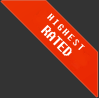
<style>
.page{position:relative;width:99px;height:98px;background:#333333}
.page>*{position:absolute;margin:0}
.t1{font:11.3px "Fixedsys";color:#ffffff}
.t2{font:12px "Fixedsys";color:#ffffff}
</style>
<div class="page">
<p class="t1" style="left:47px;top:13px;width:38px;height:37px;rotate:45deg">HIGHEST</p>
<p class="t2" style="left:40px;top:25px;width:32px;height:31px;rotate:45deg">RATED</p>
</div>
